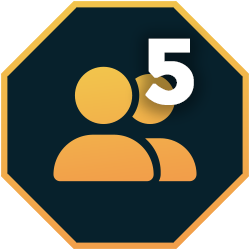
<style>
.page{position:relative;width:250px;height:250px;background:#07212c}
.page>*{position:absolute;margin:0}
.t1{font:91.7px "Montserrat-Bold";letter-spacing:0.02em;color:#ffffff;font-weight:bold}
</style>
<div class="page">
<p class="t1" style="left:145px;top:38px;width:49px;height:67px">5</p>
</div>
